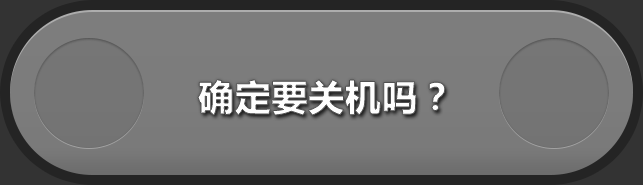
<style>
.page{position:relative;width:643px;height:185px}
.page>*{position:absolute;margin:0}
.t1{font:36px "MicrosoftYaHei-Bold";letter-spacing:0.02em;color:#fefefe}
</style>
<div class="page">
<p class="t1" style="left:198px;top:79px;width:247px;height:36px">确定要关机吗？</p>
</div>
